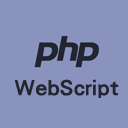
<style>
.page{position:relative;width:128px;height:128px;background:#8993be}
.page>*{position:absolute;margin:0}
.t1{font:20.9px "HanWangHeiHeavy";color:#232531;scale:1.06 1}
</style>
<div class="page">
<p class="t1" style="left:14px;top:79px;width:105px;height:19px">WebScript</p>
</div>
